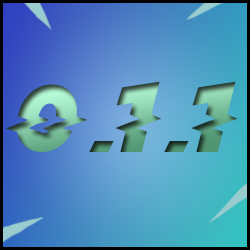
<style>
.page{position:relative;width:250px;height:250px}
.page>*{position:absolute;margin:0}
.t1{font:130px "PhelixBoomgartner-Regular"}
</style>
<div class="page">
<p class="t1" style="left:6px;top:81px;width:232px;height:71px">0.1.1</p>
</div>
